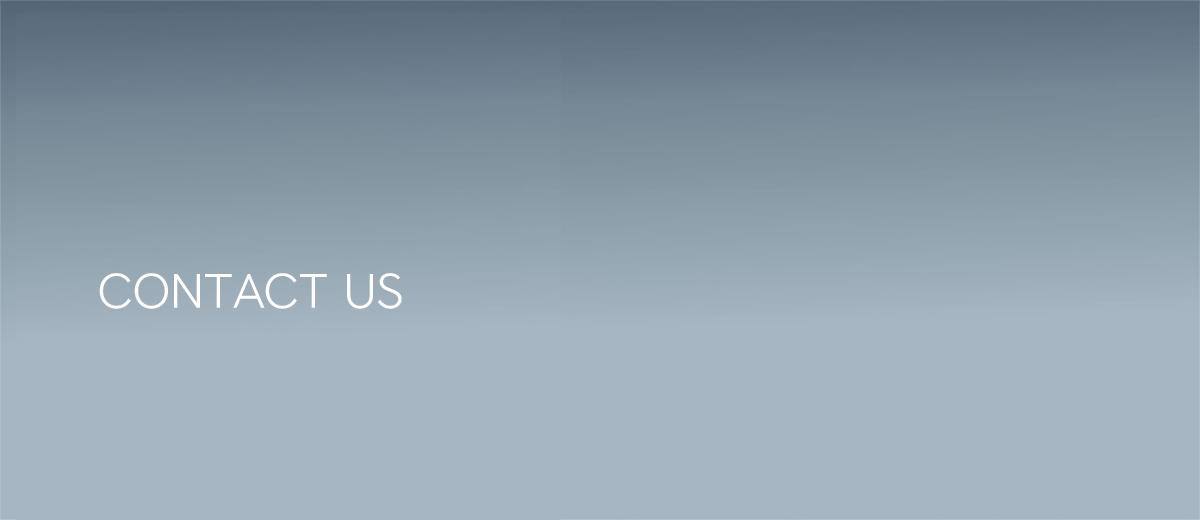
<style>
.page{position:relative;width:1200px;height:520px;background:#a6b6c3}
.page>*{position:absolute;margin:0}
.t1{font:45px "NEXONLv1GothicLowOTFRegular";color:#ffffff}
</style>
<div class="page">
<p class="t1" style="left:99px;top:273px;width:303px;height:36px">CONTACT US</p>
</div>
